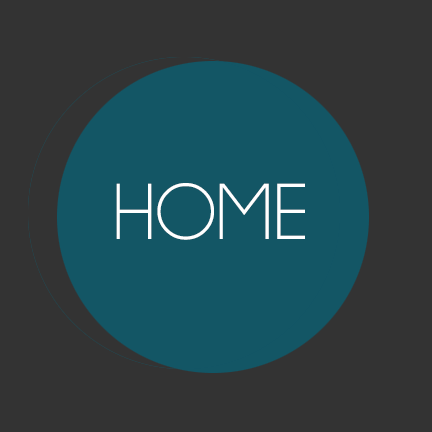
<style>
.page{position:relative;width:432px;height:432px;background:#333333}
.page>*{position:absolute;margin:0}
.t1{font:80px "Champagne&Limousines";color:#ffffff}
</style>
<div class="page">
<p class="t1" style="left:116px;top:183px;width:189px;height:57px">HOME</p>
</div>
